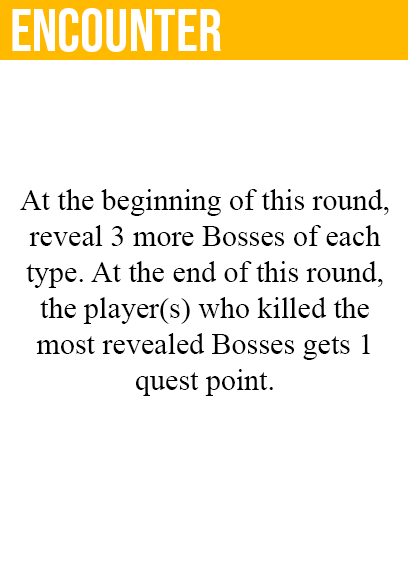
<style>
.page{position:relative;width:408px;height:585px;background:#ffffff}
.page>*{position:absolute;margin:0}
.t1{font:60px "BebasNeue-Regular";color:#ffffff}
.t2{font:30px "TimesNewRomanPSMT";color:#000000}
</style>
<div class="page">
<p class="t1" style="left:12px;top:8px;width:209px;height:44px">encounter</p>
<p class="t2" style="left:20px;top:189px;width:369px;height:207px;text-align:center">At the beginning of this round,<br>reveal 3 more Bosses of each<br>type. At the end of this round,<br>the player(s) who killed the<br>most revealed Bosses gets 1<br>quest point.</p>
</div>
